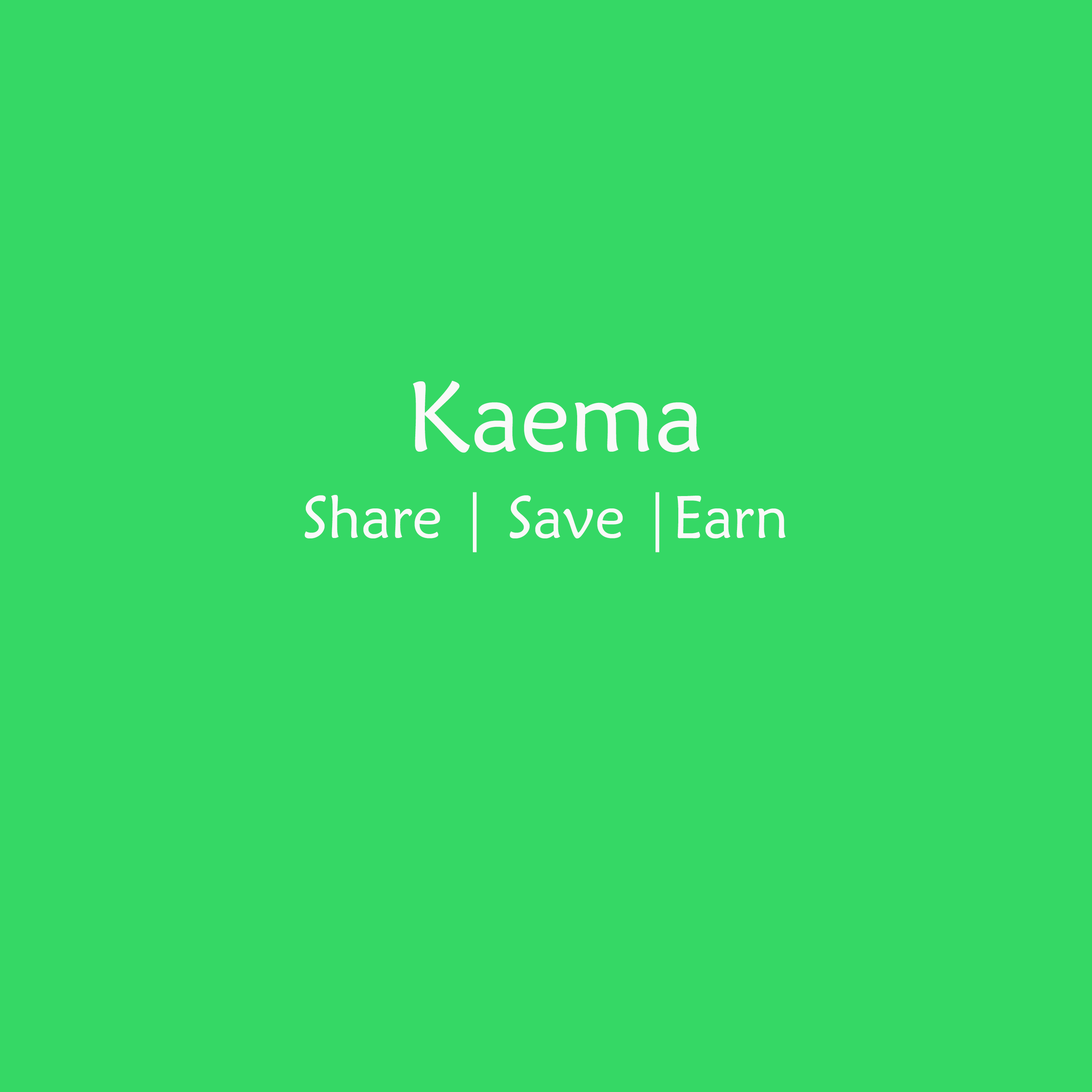
<style>
.page{position:relative;width:1092px;height:1092px;background:#35d865}
.page>*{position:absolute;margin:0}
.t1{font:99.9px "MaiandraGD-Regular";color:#f9f9f8}
.t2{font:60px "MaiandraGD-Regular";color:#f9f9f8}
</style>
<div class="page">
<p class="t1" style="left:413px;top:381px;width:287px;height:72px">Kaema</p>
<p class="t2" style="left:305px;top:492px;width:481px;height:60px">Share | Save |Earn</p>
</div>
